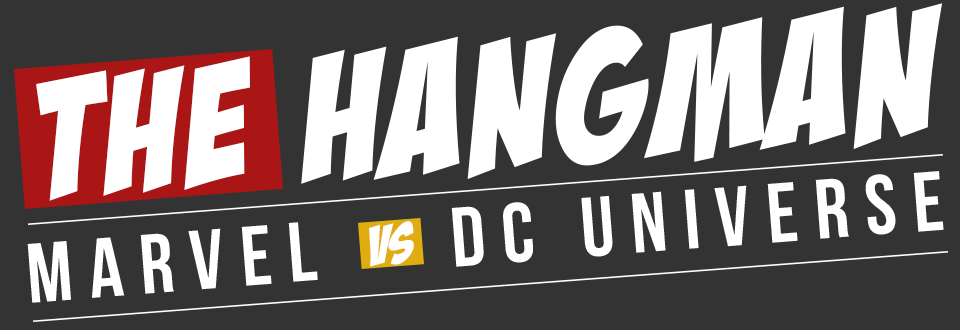
<style>
.page{position:relative;width:960px;height:330px;background:#333333}
.page>*{position:absolute;margin:0}
.t1{font:43.2px "BadaBoomBB";letter-spacing:0.05em;color:#ffffff}
.t2{font:41px "BadaBoomBB";letter-spacing:0.05em;color:#ffffff}
.t3{font:84.2px "BebasNeue";letter-spacing:0.2em;color:#ffffff}
.t4{font:13.6px "BadaBoomBB";color:#ffffff}
</style>
<div class="page">
<p class="t1" style="left:301px;top:3px;width:642px;height:181px;rotate:-4deg">HANGMAN</p>
<p class="t2" style="left:36px;top:56px;width:214px;height:145px;rotate:-4deg">THE</p>
<p class="t3" style="left:451px;top:171px;width:493px;height:96px;rotate:-4deg">DC UNIVERSE</p>
<p class="t3" style="left:27px;top:222px;width:291px;height:81px;rotate:-4deg">MARVEL</p>
<p class="t4" style="left:369px;top:221px;width:45px;height:46px;rotate:-4deg">VS</p>
</div>
